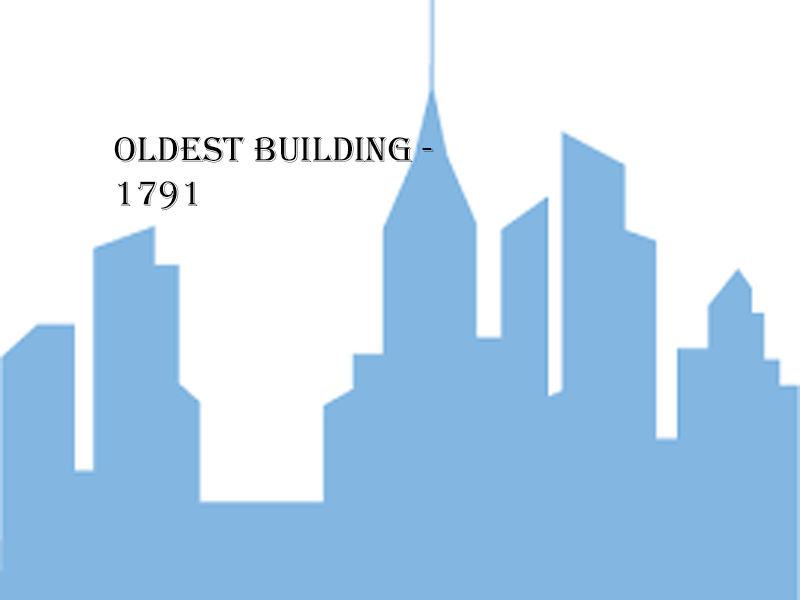
<style>
.page{position:relative;width:800px;height:600px;background:#ffffff}
.page>*{position:absolute;margin:0}
.t1{font:37px "Algerian";color:#050505}
</style>
<div class="page">
<p class="t1" style="left:114px;top:137px;width:320px;height:74px">oldest building -<br>1791</p>
</div>
